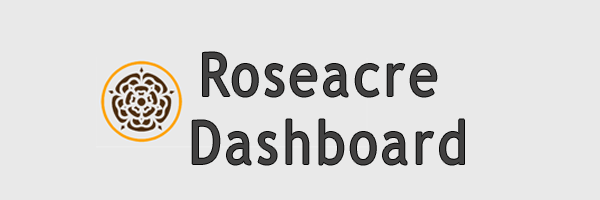
<style>
.page{position:relative;width:600px;height:200px;background:#e9e9e9}
.page>*{position:absolute;margin:0}
.t1{font:60.4px/68px "TrebuchetMS";letter-spacing:0.08em;color:#424141;scale:0.87 1}
</style>
<div class="page">
<p class="t1" style="left:192px;top:52px;width:272px;height:113px;text-align:center">Roseacre <br>Dashboard</p>
</div>
